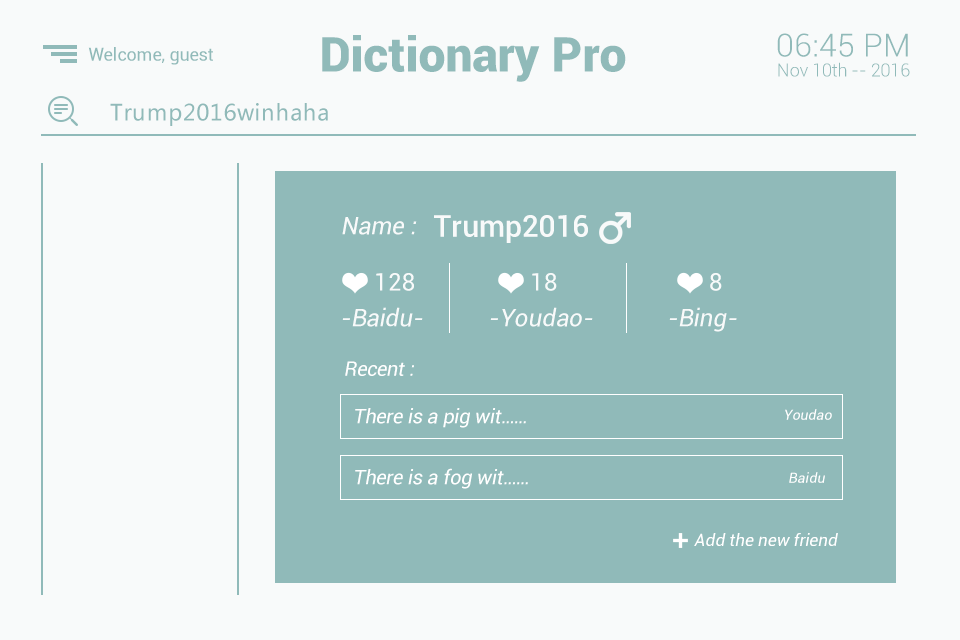
<style>
.page{position:relative;width:960px;height:640px;background:#f8fafa}
.page>*{position:absolute;margin:0}
.t1{font:48px "Roboto-Black";color:#90bab9}
.t2{font:18px/20px "Roboto-Light";letter-spacing:-0.01em;color:#90bab9}
.t3{font:32px/20px "Roboto-Light";color:#90bab9}
.t4{font:18px "Roboto-Regular";color:#90bab9}
.t5{font:22px "MicrosoftYaHei";letter-spacing:0.025em;color:#90bab9}
.t6{font:24px "Roboto-Regular";letter-spacing:-0.005em;color:#f8fafa;font-style:italic}
.t7{font:30px "Roboto-Medium";letter-spacing:-0.005em;color:#f8fafa}
.t8{font:24px "Roboto-Regular";letter-spacing:-0.005em;color:#f8fafa}
.t9{font:20px "Roboto-Regular";letter-spacing:-0.005em;color:#ffffff;font-style:italic}
.t10{font:14px "Roboto-Regular";letter-spacing:-0.005em;color:#ffffff;font-style:italic}
.t11{font:17px "Roboto-Regular";letter-spacing:-0.005em;color:#ffffff;font-style:italic}
</style>
<div class="page">
<p class="t1" style="left:322px;top:35px;width:304px;height:47px">Dictionary Pro</p>
<p class="t2" style="left:777px;top:33px;width:133px;height:44px;text-align:center"><span class="t3">06:45 PM<br></span>Nov 10th -- 2016</p>
<p class="t4" style="left:88px;top:47px;width:125px;height:18px">Welcome, guest</p>
<p class="t5" style="left:110px;top:103px;width:218px;height:23px">Trump2016winhaha</p>
<p class="t6" style="left:342px;top:217px;width:75px;height:18px">Name :</p>
<p class="t7" style="left:434px;top:215px;width:154px;height:28px">Trump2016</p>
<p class="t8" style="left:376px;top:273px;width:38px;height:18px">128</p>
<p class="t8" style="left:532px;top:273px;width:25px;height:18px">18</p>
<p class="t8" style="left:710px;top:273px;width:12px;height:18px">8</p>
<p class="t6" style="left:342px;top:307px;width:81px;height:20px">-Baidu-</p>
<p class="t6" style="left:490px;top:307px;width:103px;height:20px">-Youdao-</p>
<p class="t6" style="left:669px;top:307px;width:68px;height:25px">-Bing-</p>
<p class="t9" style="left:345px;top:361px;width:69px;height:15px">Recent :</p>
<p class="t9" style="left:355px;top:408px;width:171px;height:20px">There is a pig wit……</p>
<p class="t10" style="left:785px;top:409px;width:47px;height:11px">Youdao</p>
<p class="t9" style="left:355px;top:468px;width:173px;height:21px">There is a fog wit……</p>
<p class="t10" style="left:789px;top:472px;width:36px;height:11px">Baidu</p>
<p class="t11" style="left:694px;top:533px;width:144px;height:13px">Add the new friend</p>
</div>
